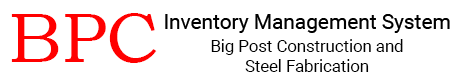
<style>
.page{position:relative;width:470px;height:80px;background:#ffffff}
.page>*{position:absolute;margin:0}
.t1{font:70.8px "BookmanOldStyle";color:#ff0000}
.t2{font:16.7px "Roboto-Regular";color:#000000}
</style>
<div class="page">
<p class="t1" style="left:11px;top:13px;width:146px;height:50px">BPC</p>
<p class="t2" style="left:211px;top:39px;width:192px;height:33px;text-align:center">Big Post Construction and<br>Steel Fabrication</p>
</div>
